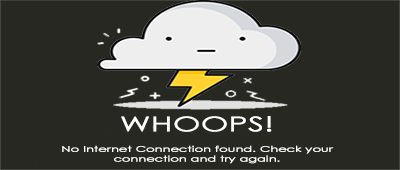
<style>
.page{position:relative;width:400px;height:170px;background:#272822}
.page>*{position:absolute;margin:0}
.t1{font:20.2px "CenturyGothic";color:#ffffff;text-transform:uppercase;font-weight:bold;scale:1.54 1}
.t2{font:8.1px "CenturyGothic";color:#ffffff;font-weight:bold;scale:1.54 1}
</style>
<div class="page">
<p class="t1" style="left:121px;top:116px;width:151px;height:16px">WHOOPS!</p>
<p class="t2" style="left:62px;top:145px;width:272px;height:19px;text-align:center">No Internet Connection found. Check your connection and try again.</p>
</div>
